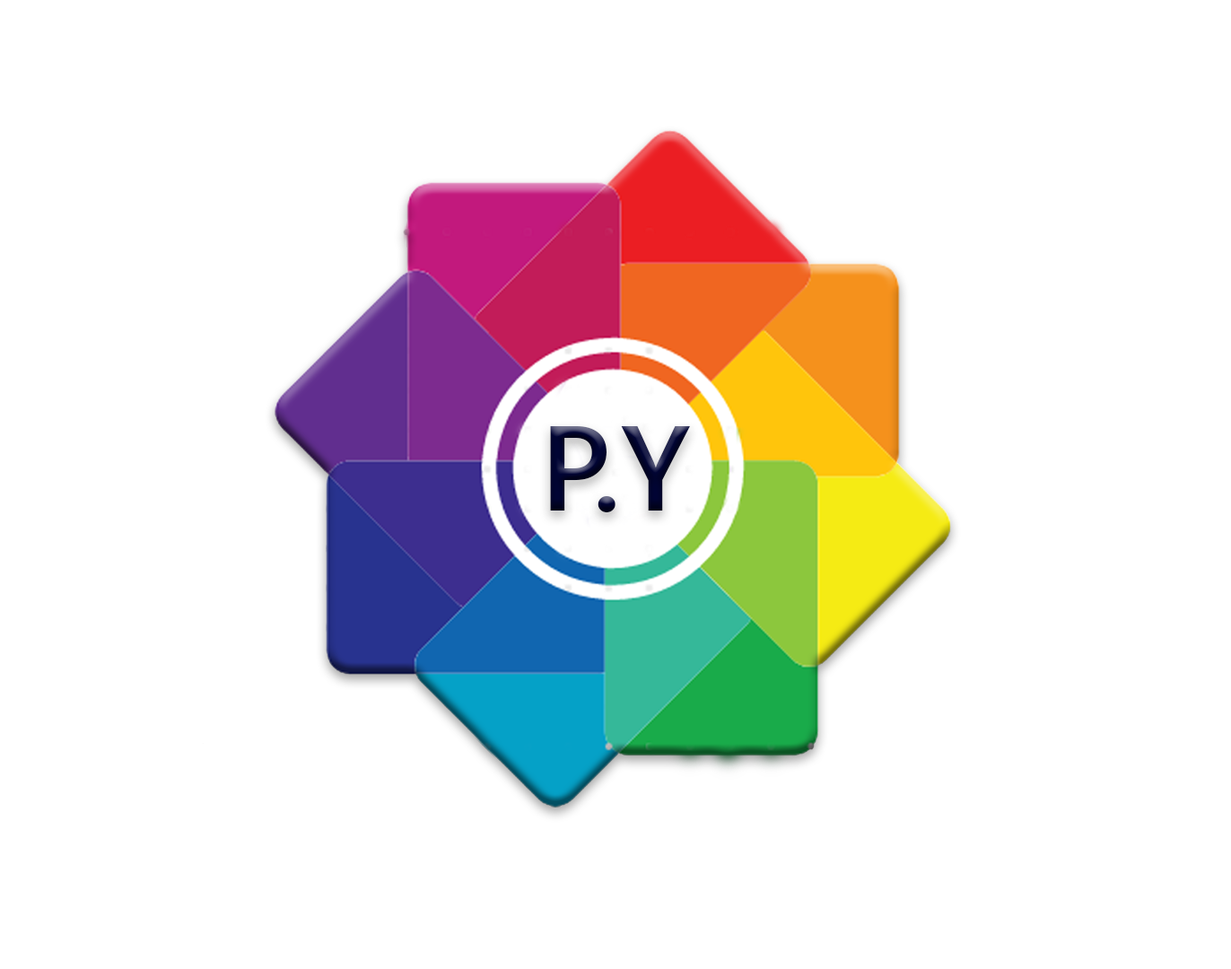
<style>
.page{position:relative;width:1231px;height:969px;background:#ffffff}
.page>*{position:absolute;margin:0}
.t1{font:120.2px "SegoeUI-Semibold";color:#010434}
</style>
<div class="page">
<p class="t1" style="left:550px;top:426px;width:140px;height:86px">P.Y</p>
</div>
